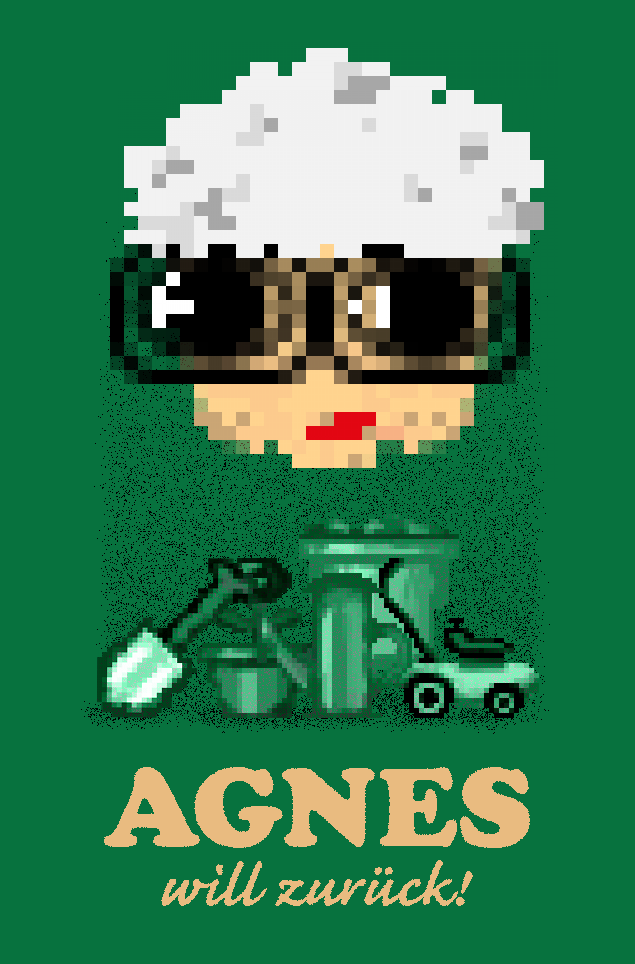
<style>
.page{position:relative;width:635px;height:964px;background:#07723e}
.page>*{position:absolute;margin:0}
.t1{font:110px "CooperBlackStd";letter-spacing:0.01em;color:#e9bb80}
.t2{font:75px "CaflischScriptPro-Bold";letter-spacing:0.01em;color:#e9bb80}
</style>
<div class="page">
<p class="t1" style="left:104px;top:766px;width:426px;height:82px">AGNES</p>
<p class="t2" style="left:161px;top:860px;width:312px;height:46px">will zurück!</p>
</div>
